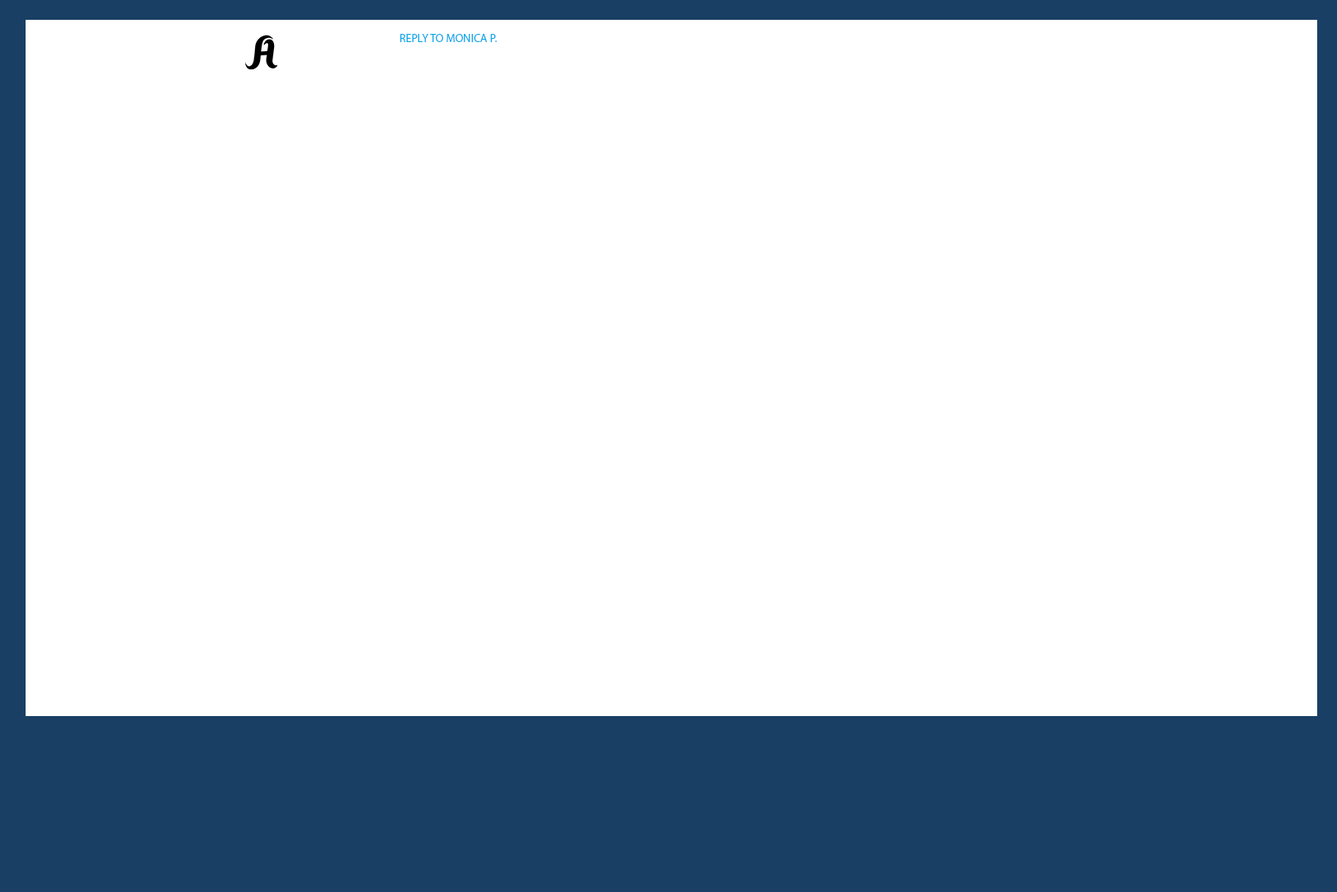
<style>
.page{position:relative;width:1337px;height:892px;background:#ffffff}
.page>*{position:absolute;margin:0}
.t1{font:11.6px "MyriadPro-Regular";color:#12aaeb;text-transform:uppercase}
</style>
<div class="page">
<p class="t1" style="left:400px;top:34px;width:97px;height:8px">REPLY TO MONICA P.</p>
</div>
